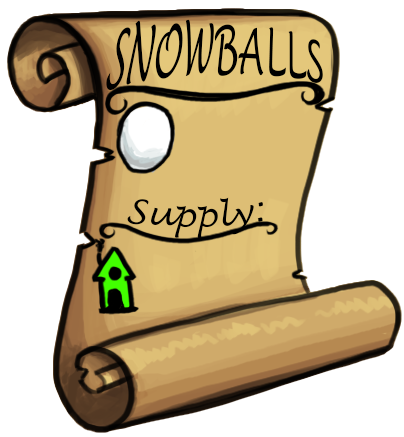
<style>
.page{position:relative;width:404px;height:437px;background:#ffffff}
.page>*{position:absolute;margin:0}
.t1{font:67.2px "LucidaHandwriting-Italic";color:#000000;scale:0.49 1}
.t2{font:33.3px "LucidaHandwriting-Italic";color:#000000}
</style>
<div class="page">
<p class="t1" style="left:106px;top:19px;width:217px;height:71px">SNOWBALLS</p>
<p class="t2" style="left:127px;top:197px;width:136px;height:42px">Supply:</p>
</div>
